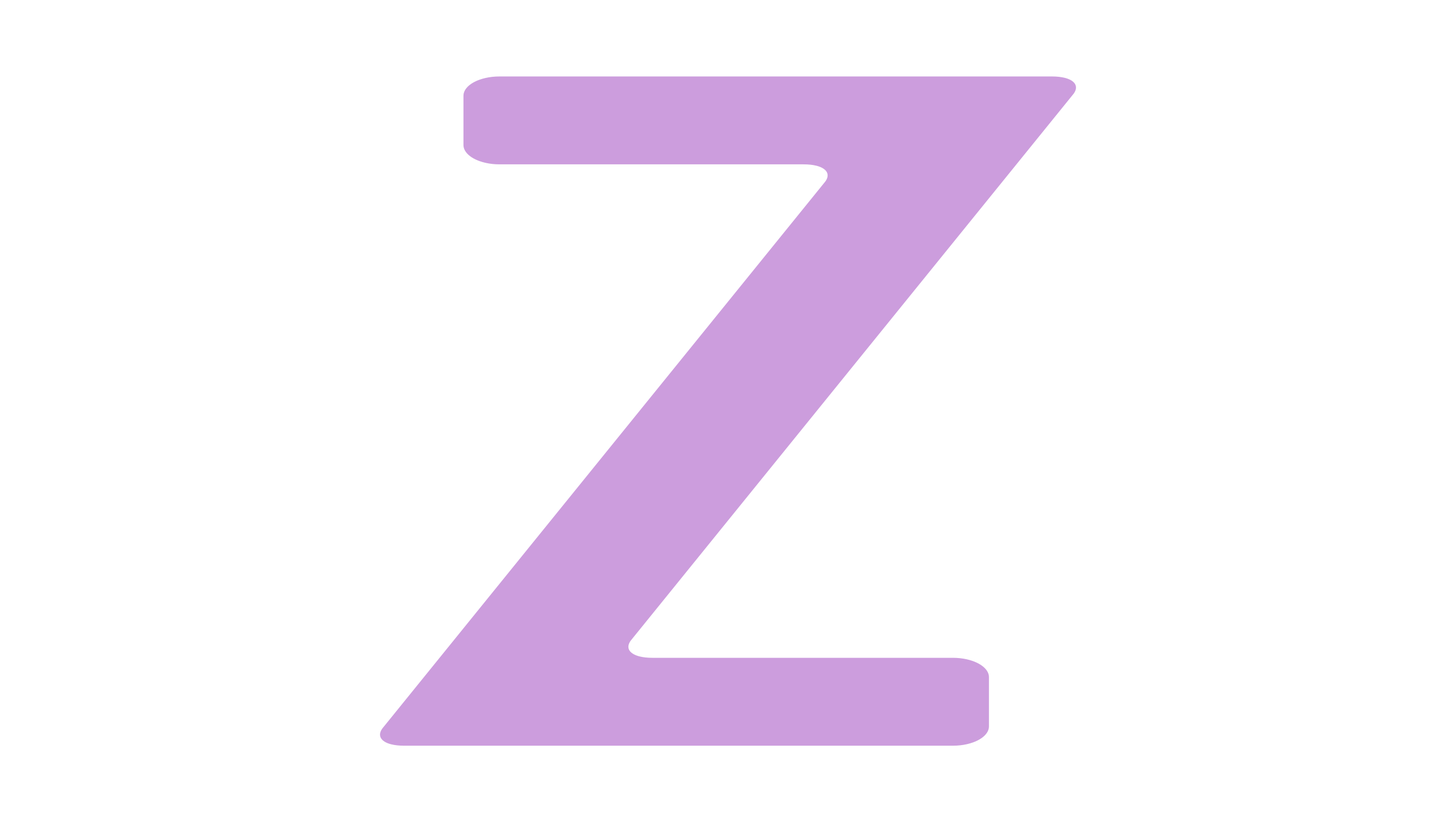
<style>
.page{position:relative;width:1456px;height:819px;background:#ffffff}
.page>*{position:absolute;margin:0}
.t1{font:965.7px "HANDLERRegular";letter-spacing:0.025em;color:#cc9ddd;scale:1.86 1}
</style>
<div class="page">
<p class="t1" style="left:380px;top:76px;width:696px;height:670px">Z</p>
</div>
